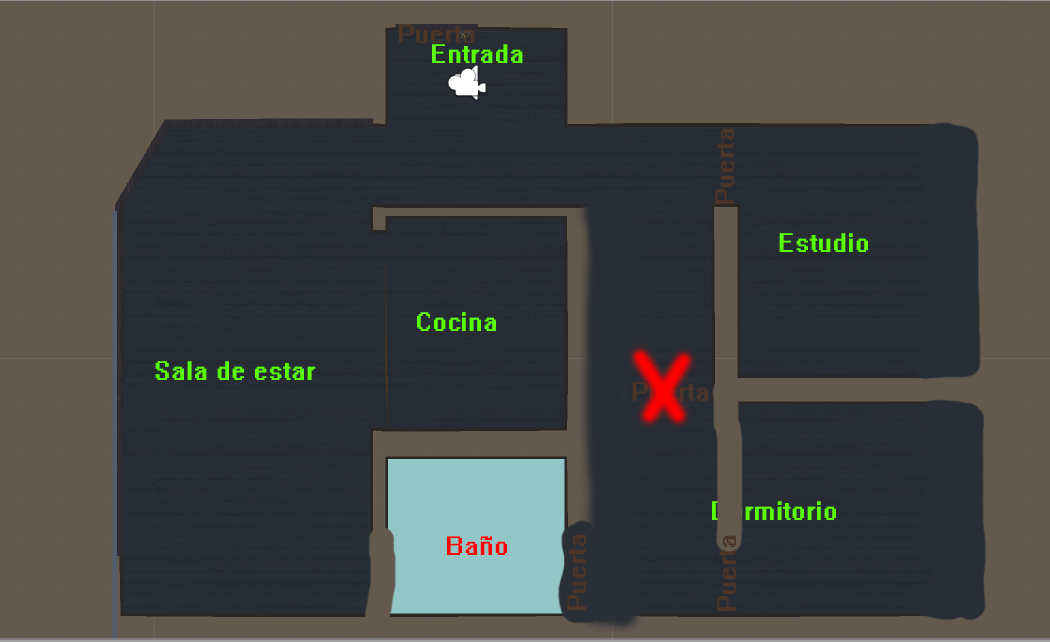
<style>
.page{position:relative;width:1050px;height:642px;background:#63594d}
.page>*{position:absolute;margin:0}
.t1{font:23.9px "System";color:#4b3428}
.t2{font:24px "System";color:#5aff00}
.t3{font:24px "System";color:#ff0000}
</style>
<div class="page">
<p class="t1" style="left:399px;top:24px;width:76px;height:19px">Puerta</p>
<p class="t2" style="left:432px;top:44px;width:91px;height:19px">Entrada</p>
<p class="t1" style="left:715px;top:128px;width:19px;height:76px;rotate:-90deg">Puerta</p>
<p class="t2" style="left:779px;top:233px;width:89px;height:19px">Estudio</p>
<p class="t2" style="left:417px;top:312px;width:79px;height:19px">Cocina</p>
<p class="t2" style="left:155px;top:361px;width:161px;height:19px">Sala de estar</p>
<p class="t2" style="left:712px;top:501px;width:124px;height:19px">Dormitorio</p>
<p class="t1" style="left:567px;top:534px;width:19px;height:76px;rotate:-90deg">Puerta</p>
<p class="t3" style="left:447px;top:536px;width:60px;height:19px">Baño</p>
<p class="t1" style="left:717px;top:535px;width:19px;height:76px;rotate:-90deg">Puerta</p>
</div>
